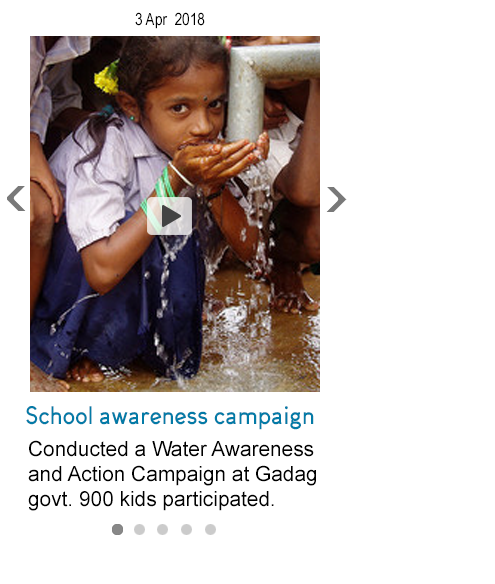
<style>
.page{position:relative;width:495px;height:584px;background:#ffffff}
.page>*{position:absolute;margin:0}
.t1{font:16.7px "ArialNarrow";color:#000000}
.t2{font:25px "Arvin-Bold";color:#037ba7;scale:0.91 1}
.t3{font:20.8px "ArialMT";color:#000000}
</style>
<div class="page">
<p class="t1" style="left:135px;top:12px;width:70px;height:17px">3 Apr  2018</p>
<p class="t2" style="left:26px;top:406px;width:288px;height:24px">School awareness campaign</p>
<p class="t3" style="left:28px;top:440px;width:288px;height:71px">Conducted a Water Awareness and Action Campaign at Gadag govt. 900 kids participated.</p>
</div>
